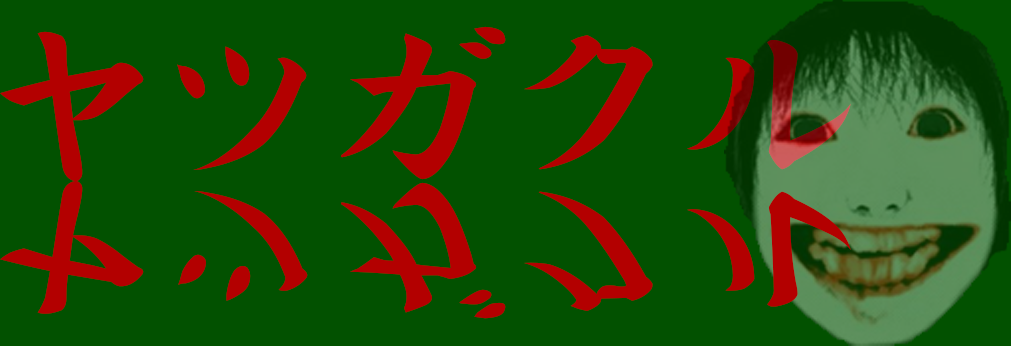
<style>
.page{position:relative;width:1011px;height:346px;background:#025100}
.page>*{position:absolute;margin:0}
.t1{font:209.3px "HGPGyoshotai";color:#b30000}
.t2{font:186.1px "HGPGyoshotai";color:#b30000;scale:1.12 1}
</style>
<div class="page">
<p class="t1" style="left:0px;top:26px;width:851px;height:156px">ヤツガクル</p>
<p class="t2" style="left:0px;top:180px;width:851px;height:139px">ヤツガクル</p>
</div>
